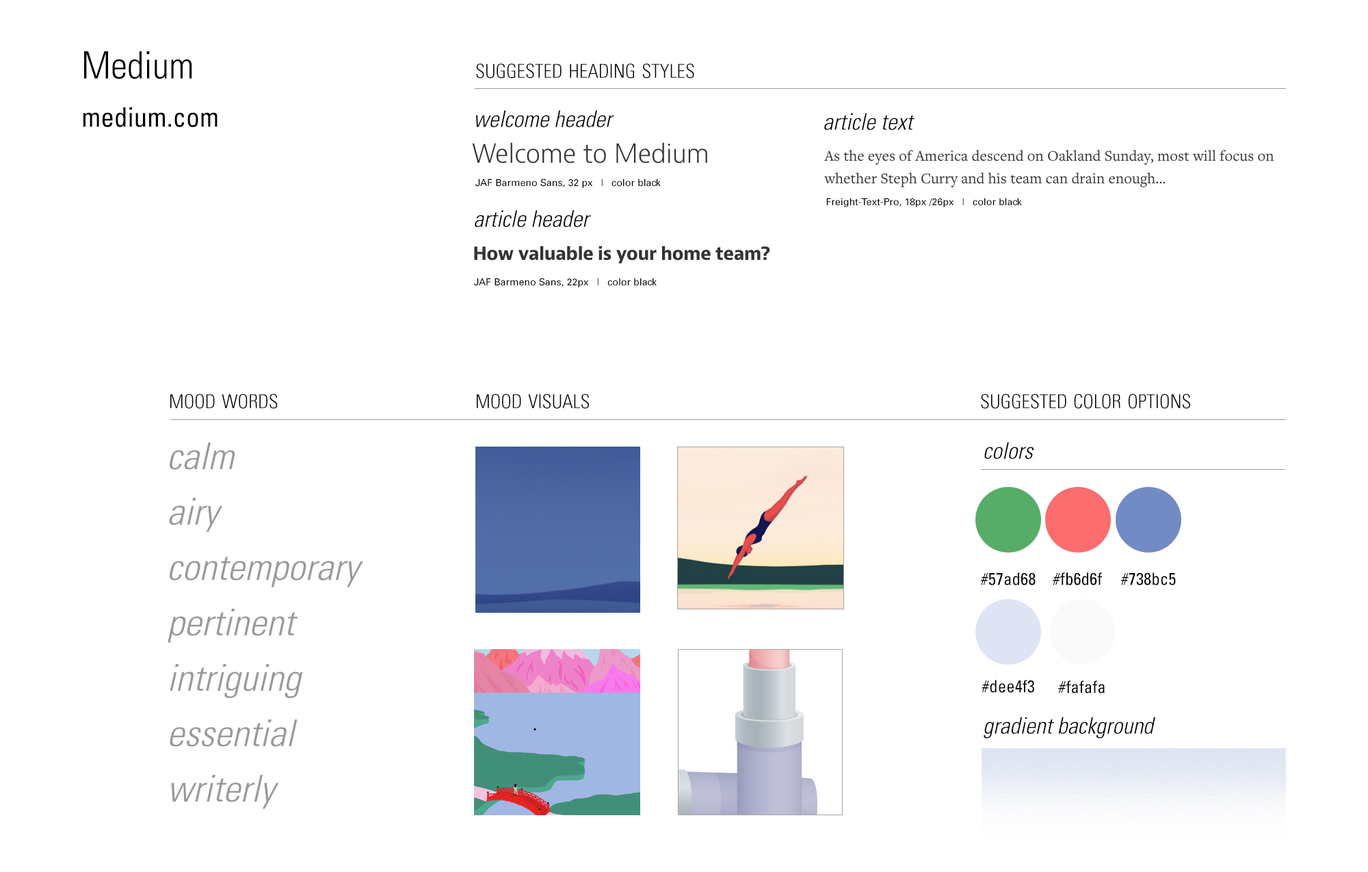
<style>
.page{position:relative;width:1368px;height:872px;background:#ffffff}
.page>*{position:absolute;margin:0}
.t1{font:27px/48.2px "Univers-Condensed";color:#000000}
.t2{font:37.6px/48.2px "Univers-CondensedLight";color:#000000}
.t3{font:27.4px "Univers-CondensedLight";color:#000000;font-variant:small-caps}
.t4{font:23.1px "Univers-CondensedLightOblique";color:#000000}
.t5{font:9.7px "Univers";color:#000000}
.t6{font:37px/55.4px "Univers-CondensedLightOblique";color:#999999;scale:1.05 1}
.t7{font:17.1px "Univers-Condensed";color:#000000}
</style>
<div class="page">
<p class="t1" style="left:83px;top:51px;width:134px;height:76px"><span class="t2">Medium<br></span>medium.com</p>
<p class="t3" style="left:476px;top:64px;width:218px;height:15px">suggested heading styles</p>
<p class="t4" style="left:476px;top:110px;width:138px;height:17px">welcome header</p>
<p class="t4" style="left:824px;top:113px;width:90px;height:17px">article text</p>
<p class="t5" style="left:475px;top:178px;width:186px;height:10px">JAF Barmeno Sans, 32 px   |   color black</p>
<p class="t5" style="left:826px;top:198px;width:196px;height:9px">Freight-Text-Pro, 18px /26px   |   color black</p>
<p class="t4" style="left:475px;top:210px;width:116px;height:17px">article header</p>
<p class="t5" style="left:474px;top:278px;width:182px;height:9px">JAF Barmeno Sans, 22px   |   color black</p>
<p class="t3" style="left:170px;top:394px;width:108px;height:15px">mood words</p>
<p class="t3" style="left:477px;top:394px;width:112px;height:15px">mood visuals</p>
<p class="t3" style="left:981px;top:394px;width:209px;height:15px">suggested color options</p>
<p class="t6" style="left:168px;top:442px;width:195px;height:367px">calm<br>airy<br>contemporary<br>pertinent<br>intriguing<br>essential<br>writerly</p>
<p class="t4" style="left:984px;top:442px;width:49px;height:17px">colors</p>
<p class="t7" style="left:980px;top:572px;width:55px;height:13px">#57ad68</p>
<p class="t7" style="left:1052px;top:572px;width:50px;height:13px">#fb6d6f</p>
<p class="t7" style="left:1120px;top:572px;width:56px;height:13px">#738bc5</p>
<p class="t7" style="left:981px;top:680px;width:53px;height:13px">#dee4f3</p>
<p class="t7" style="left:1058px;top:680px;width:46px;height:13px">#fafafa</p>
<p class="t4" style="left:983px;top:717px;width:172px;height:22px">gradient background</p>
</div>
